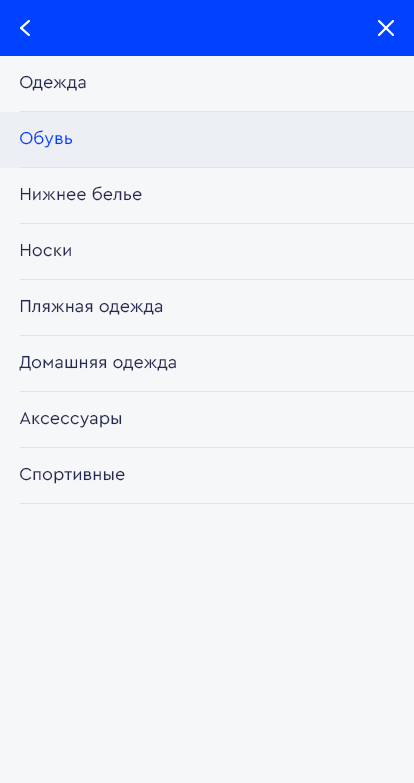
<style>
.page{position:relative;width:414px;height:783px;background:#f6f7f9}
.page>*{position:absolute;margin:0}
.t1{font:18px "CeraPro-Regular";color:#242954}
.t2{font:18px "CeraPro-Regular";color:#0042ff}
</style>
<div class="page">
<p class="t1" style="left:20px;top:75px;width:66px;height:16px">Одежда</p>
<p class="t2" style="left:20px;top:130px;width:53px;height:18px">Обувь</p>
<p class="t1" style="left:20px;top:186px;width:122px;height:15px">Нижнее белье</p>
<p class="t1" style="left:20px;top:243px;width:51px;height:14px">Носки</p>
<p class="t1" style="left:20px;top:299px;width:143px;height:16px">Пляжная одежда</p>
<p class="t1" style="left:19px;top:355px;width:157px;height:16px">Домашняя одежда</p>
<p class="t1" style="left:19px;top:412px;width:103px;height:16px">Аксессуары</p>
<p class="t1" style="left:20px;top:467px;width:105px;height:17px">Спортивные</p>
</div>
